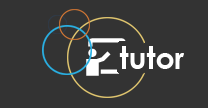
<style>
.page{position:relative;width:208px;height:108px;background:#333333}
.page>*{position:absolute;margin:0}
.t1{font:30px "CenturyGothic-Bold";color:#ffffff}
</style>
<div class="page">
<p class="t1" style="left:119px;top:46px;width:65px;height:23px">tutor</p>
</div>
